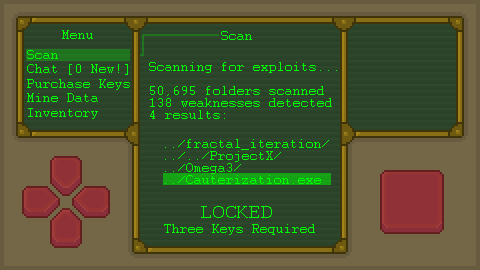
<style>
.page{position:relative;width:480px;height:270px;background:#736747}
.page>*{position:absolute;margin:0}
.t1{font:12px "Courier";color:#00ff00}
.t2{font:10px "Courier";color:#00ff00}
.t3{font:24px "Courier";color:#00ff00}
</style>
<div class="page">
<p class="t1" style="left:62px;top:30px;width:31px;height:9px">Menu</p>
<p class="t2" style="left:221px;top:31px;width:31px;height:9px">Scan</p>
<p class="t1" style="left:27px;top:50px;width:103px;height:69px;text-align:right">Scan<br>Chat [0 New!]<br>Purchase Keys<br>Mine Data<br>Inventory</p>
<p class="t2" style="left:149px;top:62px;width:188px;height:57px;text-align:right">Scanning for exploits...<br><br>50,695 folders scanned<br>138 weaknesses detected<br>4 results:</p>
<p class="t2" style="left:165px;top:139px;width:164px;height:45px;text-align:right">../fractal_iteration/<br>../../ProjectX/<br>../Omega3/<br>../Cauterization.exe</p>
<p class="t3" style="left:201px;top:206px;width:71px;height:12px">LOCKED</p>
<p class="t1" style="left:164px;top:224px;width:151px;height:11px">Three Keys Required</p>
</div>
